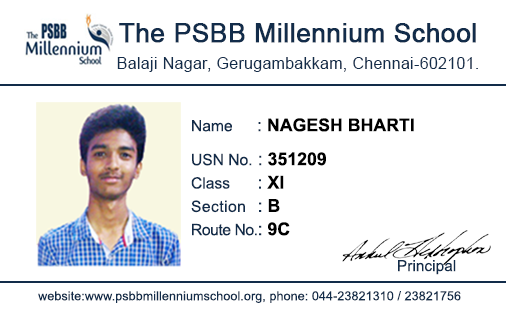
<style>
.page{position:relative;width:506px;height:319px;background:#ffffff}
.page>*{position:absolute;margin:0}
.t1{font:15.6px/27.1px "ArialMT";letter-spacing:0.03em;color:#122c4a}
.t2{font:26px "ArialMT";color:#122c4a;font-weight:bold}
.t3{font:17.8px "Arial-BoldMT";color:#000000;text-transform:uppercase}
.t4{font:15.6px "ArialMT";color:#122c4a}
.t5{font:17.8px "ArialMT";color:#122c4a}
.t6{font:15.6px/33.9px "ArialMT";color:#122c4a}
.t7{font:17.8px/33.9px "ArialMT";color:#122c4a}
.t8{font:17.8px/33.9px "Arial-BoldMT";color:#000000}
.t9{font:15.6px/23.3px "ArialMT";color:#122c4a}
.t10{font:17.8px/23.3px "ArialMT";color:#122c4a}
.t11{font:17.8px/23.3px "Arial-BoldMT";color:#000000}
.t12{font:15.6px/23.3px "ArialMT";letter-spacing:0.03em;color:#122c4a}
.t13{font:15.6px/23.3px "ArialMT";letter-spacing:-0.026em;color:#122c4a}
.t14{font:15.2px "ArialMT";letter-spacing:0.007em;color:#122c4a}
.t15{font:12.5px "ArialMT";letter-spacing:0.007em;color:#122c4a}
</style>
<div class="page">
<p class="t1" style="left:117px;top:23px;width:361px;height:49px;text-align:center"><span class="t2">The PSBB Millennium School<br></span>Balaji Nagar, Gerugambakkam, Chennai-602101.</p>
<p class="t3" style="left:191px;top:118px;width:223px;height:118px"><span class="t4">Name      </span><span class="t5">: </span>Nagesh Bharti<br><span class="t6">USN No. </span><span class="t7">: </span><span class="t8">351209<br></span><span class="t9">Class      </span><span class="t10">: </span><span class="t11">XI<br></span><span class="t12">Section   </span><span class="t10">: </span><span class="t11">B<br></span><span class="t13">Route No.</span><span class="t10">: </span><span class="t11">9C</span></p>
<p class="t14" style="left:398px;top:260px;width:58px;height:15px">Principal</p>
<p class="t15" style="left:38px;top:291px;width:423px;height:12px">website:www.psbbmillenniumschool.org, phone: 044-23821310 / 23821756</p>
</div>
